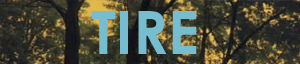
<style>
.page{position:relative;width:300px;height:64px}
.page>*{position:absolute;margin:0}
.t1{font:60px "CenturyGothic-Bold";color:#76bdcf}
</style>
<div class="page">
<p class="t1" style="left:91px;top:11px;width:106px;height:43px">TIRE</p>
</div>
